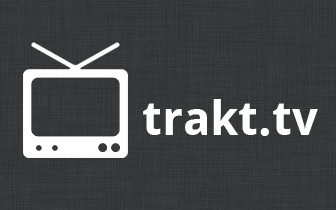
<style>
.page{position:relative;width:336px;height:210px}
.page>*{position:absolute;margin:0}
.t1{font:48px "DroidSans-Bold";color:#ffffff}
</style>
<div class="page">
<p class="t1" style="left:143px;top:99px;width:175px;height:37px">trakt.tv</p>
</div>
